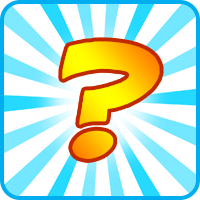
<style>
.page{position:relative;width:200px;height:200px;background:#ffffff}
.page>*{position:absolute;margin:0}
.t1{font:124.9px "BDCartoonShout"}
</style>
<div class="page">
<p class="t1" style="left:62px;top:41px;width:98px;height:118px">?</p>
</div>
